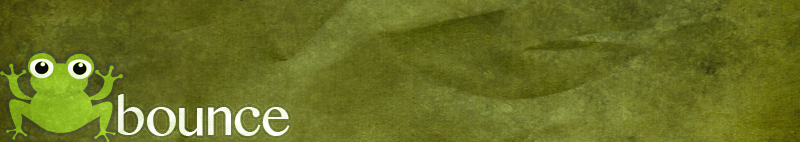
<style>
.page{position:relative;width:800px;height:142px}
.page>*{position:absolute;margin:0}
.t1{font:51.9px "TamilMN";letter-spacing:-0.025em;color:#fcfdfd}
</style>
<div class="page">
<p class="t1" style="left:118px;top:94px;width:172px;height:42px">bounce</p>
</div>
